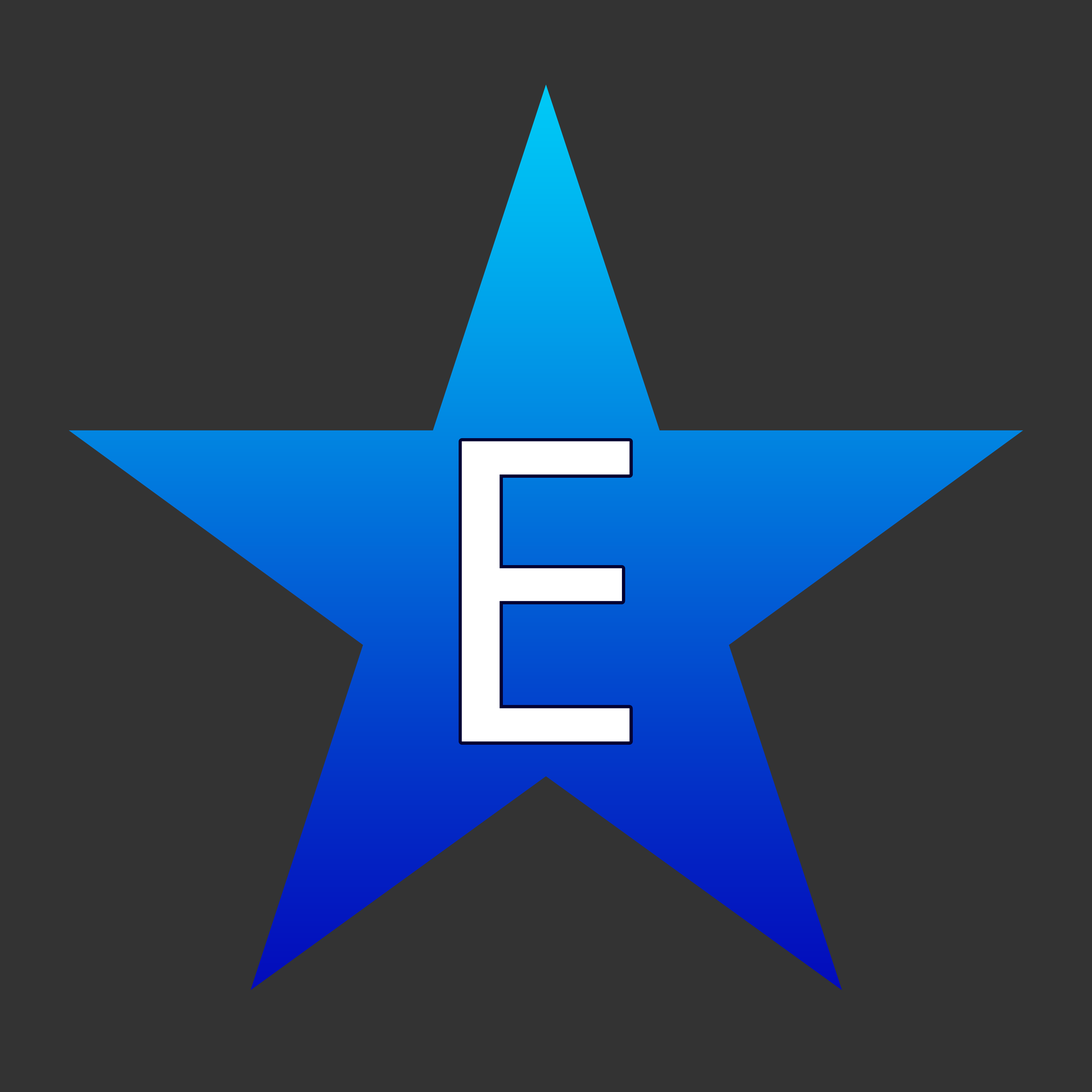
<style>
.page{position:relative;width:1092px;height:1092px;background:#333333}
.page>*{position:absolute;margin:0}
.t1{font:1244.9px "DejaVuSans"}
.t2{font:420.4px "NotoSans-Regular";color:#ffffff}
</style>
<div class="page">
<p class="t1" style="left:69px;top:84px;width:954px;height:906px">★</p>
<p class="t2" style="left:462px;top:441px;width:168px;height:300px">E</p>
</div>
